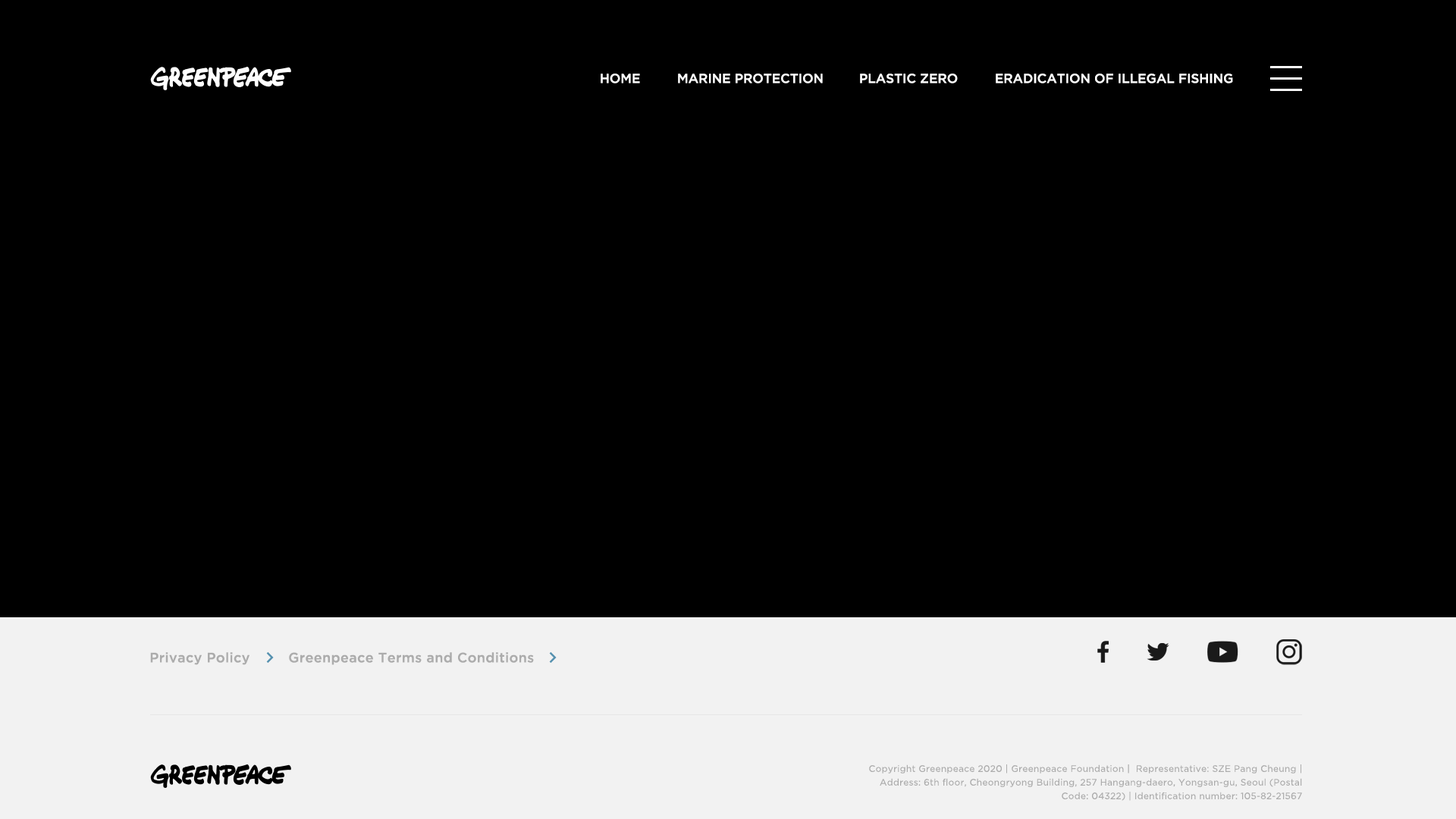
<style>
.page{position:relative;width:1456px;height:819px;background:#000000}
.page>*{position:absolute;margin:0}
.t1{font:12.9px "GothamPro-Medium";color:#ffffff}
.t2{font:12.9px "GothamPro-Medium";color:#ffffff;text-transform:uppercase}
.t3{font:13.6px "GothamPro-Medium";letter-spacing:0.02em;color:#acacac}
.t4{font:9.1px/13.6px "GothamPro";letter-spacing:0.02em;color:#acacac}
</style>
<div class="page">
<p class="t1" style="left:601px;top:74px;width:39px;height:9px">HOME</p>
<p class="t2" style="left:678px;top:74px;width:145px;height:9px">marine protection</p>
<p class="t2" style="left:860px;top:74px;width:98px;height:9px">plastic zero</p>
<p class="t2" style="left:996px;top:74px;width:237px;height:9px">eradication of illegal fishing</p>
<p class="t3" style="left:150px;top:652px;width:99px;height:13px">Privacy Policy</p>
<p class="t3" style="left:289px;top:652px;width:245px;height:13px">Greenpeace Terms and Conditions</p>
<p class="t4" style="left:869px;top:764px;width:433px;height:37px;text-align:right">Copyright Greenpeace 2020 | Greenpeace Foundation |  Representative: SZE Pang Cheung | Address: 6th floor, Cheongryong Building, 257 Hangang-daero, Yongsan-gu, Seoul (Postal Code: 04322) | Identification number: 105-82-21567</p>
</div>
